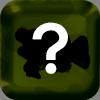
<style>
.page{position:relative;width:100px;height:100px}
.page>*{position:absolute;margin:0}
.t1{font:60px "HGSSoeiKakugothicUB";color:#ffffff}
</style>
<div class="page">
<p class="t1" style="left:32px;top:22px;width:36px;height:52px">？</p>
</div>
